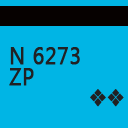
<style>
.page{position:relative;width:128px;height:128px;background:#00b5e5}
.page>*{position:absolute;margin:0}
.t1{font:23.5px/20.9px "SegoeUI";letter-spacing:0.02em;color:#212123;font-weight:bold;scale:0.89 1}
.t2{font:23.5px/20.9px "ZapfDingbats";letter-spacing:0.02em;color:#212123;font-weight:bold;scale:0.89 1}
</style>
<div class="page">
<p class="t1" style="left:9px;top:47px;width:115px;height:60px">N 6273 <br>ZP<br>            <span class="t2">vv</span></p>
</div>
